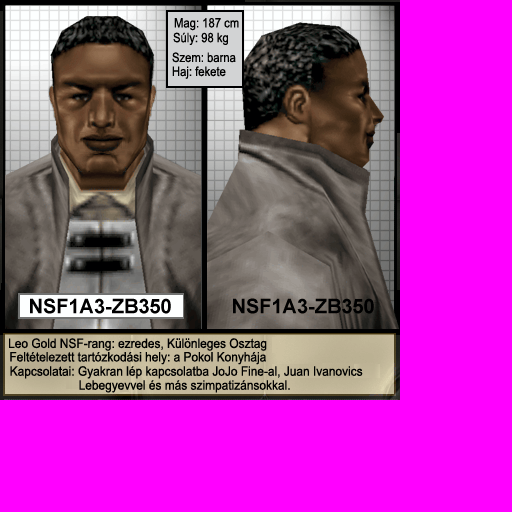
<style>
.page{position:relative;width:512px;height:512px;background:#ff00ff}
.page>*{position:absolute;margin:0}
.t1{font:13.1px "ArialNarrow";color:#000000;scale:1.05 1}
.t2{font:13.1px "ArialNarrow";color:#000000;scale:1.11 1}
</style>
<div class="page">
<p class="t1" style="left:174px;top:18px;width:65px;height:13px">Mag: 187 cm</p>
<p class="t1" style="left:173px;top:32px;width:55px;height:13px">Súly: 98 kg</p>
<p class="t1" style="left:172px;top:52px;width:64px;height:11px">Szem: barna</p>
<p class="t1" style="left:172px;top:66px;width:54px;height:13px">Haj: fekete</p>
<p class="t2" style="left:9px;top:338px;width:258px;height:13px">Leo Gold NSF­­-rang: ezredes, Különleges Osztag</p>
<p class="t2" style="left:10px;top:352px;width:256px;height:13px">Feltételezett tartózkodási hely: a Pokol Konyhája</p>
<p class="t2" style="left:10px;top:366px;width:353px;height:13px">Kapcsolatai: Gyakran lép kapcsolatba JoJo Fine-al, Juan Ivanovics</p>
<p class="t2" style="left:79px;top:380px;width:211px;height:13px">Lebegyevvel és más szimpatizánsokkal.</p>
</div>
